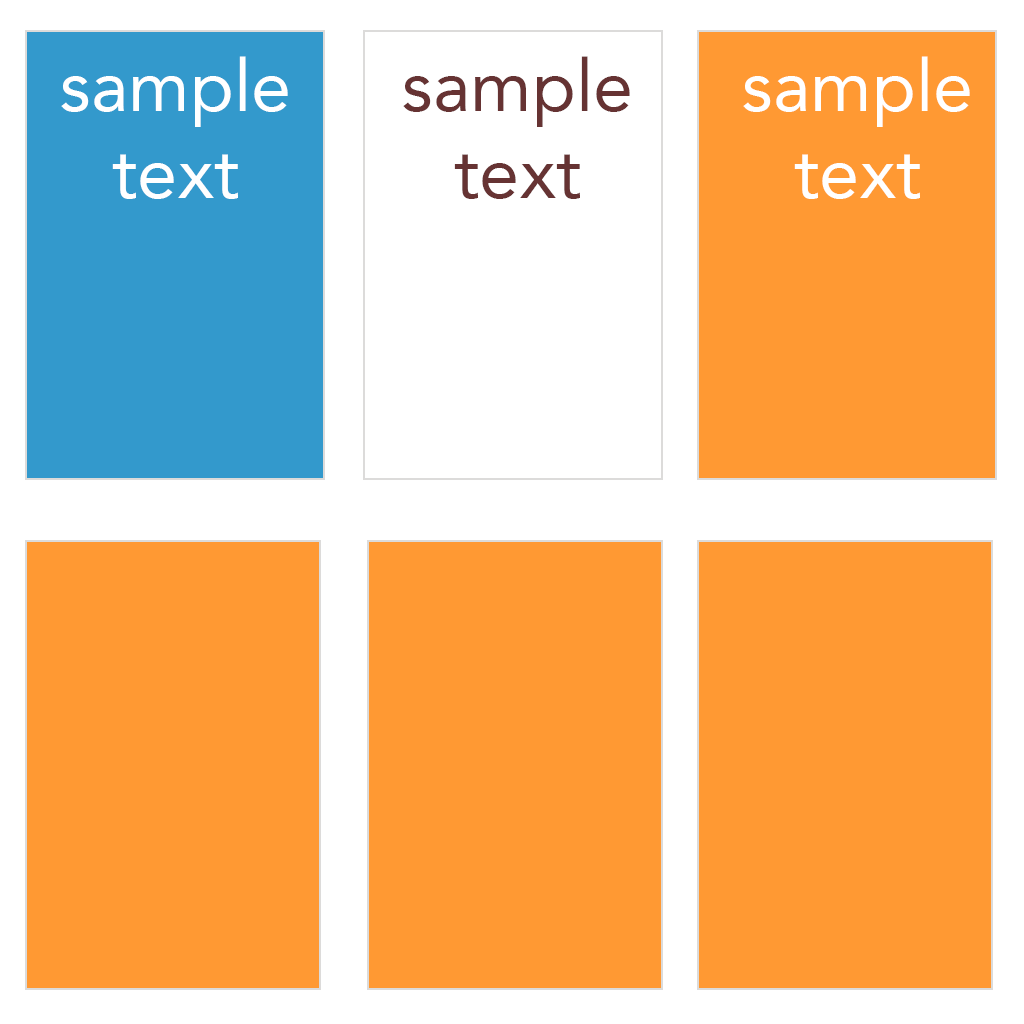
<style>
.page{position:relative;width:1024px;height:1024px;background:#ff9933}
.page>*{position:absolute;margin:0}
.t1{font:72px "Avenir-Roman";color:#ffffff}
.t2{font:72px "Avenir-Roman";color:#663333}
</style>
<div class="page">
<p class="t1" style="left:61px;top:56px;width:227px;height:143px;text-align:center">sample text</p>
<p class="t2" style="left:403px;top:56px;width:227px;height:143px;text-align:center">sample text</p>
<p class="t1" style="left:743px;top:56px;width:227px;height:143px;text-align:center">sample text</p>
</div>
